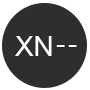
<style>
.page{position:relative;width:90px;height:90px;background:#2e2e2e}
.page>*{position:absolute;margin:0}
.t1{font:28px "ArialSpecialG1";color:#ffffff}
</style>
<div class="page">
<p class="t1" style="left:15px;top:36px;width:37px;height:20px">XN</p>
<p class="t1" style="left:56px;top:45px;width:9px;height:2px">-</p>
<p class="t1" style="left:68px;top:45px;width:9px;height:2px">-</p>
</div>
